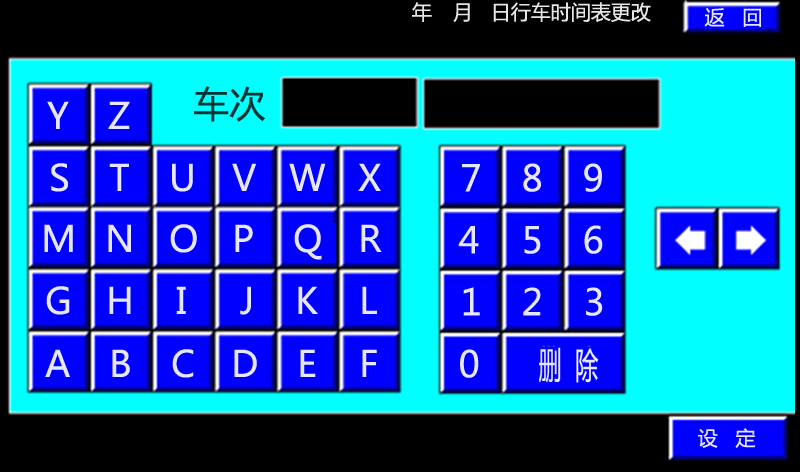
<style>
.page{position:relative;width:800px;height:472px;background:#000000}
.page>*{position:absolute;margin:0}
.t1{font:20px "MicrosoftYaHei";color:#e6e6e6}
.t2{font:20px "MicrosoftYaHei";color:#e6e6ff}
.t3{font:36px "MicrosoftYaHei";color:#003333}
.t4{font:36px "MicrosoftYaHei";color:#e6e6ff}
</style>
<div class="page">
<p class="t1" style="left:412px;top:2px;width:20px;height:20px">年</p>
<p class="t1" style="left:453px;top:3px;width:17px;height:20px">月</p>
<p class="t1" style="left:493px;top:2px;width:158px;height:20px">日行车时间表更改</p>
<p class="t2" style="left:704px;top:8px;width:57px;height:19px">返   回</p>
<p class="t3" style="left:194px;top:86px;width:71px;height:36px">车次</p>
<p class="t4" style="left:47px;top:101px;width:22px;height:28px">Y</p>
<p class="t4" style="left:108px;top:101px;width:22px;height:28px">Z</p>
<p class="t4" style="left:51px;top:163px;width:17px;height:29px">S</p>
<p class="t4" style="left:109px;top:163px;width:20px;height:28px">T</p>
<p class="t4" style="left:172px;top:163px;width:21px;height:29px">U</p>
<p class="t4" style="left:232px;top:163px;width:25px;height:28px">V</p>
<p class="t4" style="left:289px;top:163px;width:37px;height:28px">W</p>
<p class="t4" style="left:358px;top:163px;width:23px;height:28px">X</p>
<p class="t4" style="left:462px;top:164px;width:18px;height:28px">7</p>
<p class="t4" style="left:523px;top:163px;width:18px;height:29px">8</p>
<p class="t4" style="left:584px;top:163px;width:18px;height:29px">9</p>
<p class="t4" style="left:44px;top:224px;width:29px;height:28px">M</p>
<p class="t4" style="left:108px;top:224px;width:23px;height:28px">N</p>
<p class="t4" style="left:170px;top:224px;width:27px;height:29px">O</p>
<p class="t4" style="left:235px;top:224px;width:18px;height:28px">P</p>
<p class="t4" style="left:294px;top:224px;width:28px;height:36px">Q</p>
<p class="t4" style="left:361px;top:224px;width:21px;height:28px">R</p>
<p class="t4" style="left:458px;top:226px;width:21px;height:28px">4</p>
<p class="t4" style="left:524px;top:226px;width:17px;height:28px">5</p>
<p class="t4" style="left:584px;top:225px;width:19px;height:29px">6</p>
<p class="t4" style="left:46px;top:286px;width:24px;height:29px">G</p>
<p class="t4" style="left:109px;top:286px;width:22px;height:28px">H</p>
<p class="t4" style="left:176px;top:286px;width:10px;height:28px">I</p>
<p class="t4" style="left:240px;top:286px;width:11px;height:29px">J</p>
<p class="t4" style="left:298px;top:286px;width:20px;height:28px">K</p>
<p class="t4" style="left:362px;top:286px;width:15px;height:28px">L</p>
<p class="t4" style="left:463px;top:287px;width:17px;height:29px">1</p>
<p class="t4" style="left:523px;top:287px;width:18px;height:29px">2</p>
<p class="t4" style="left:586px;top:287px;width:17px;height:29px">3</p>
<p class="t4" style="left:45px;top:349px;width:25px;height:28px">A</p>
<p class="t4" style="left:112px;top:349px;width:18px;height:28px">B</p>
<p class="t4" style="left:172px;top:349px;width:22px;height:29px">C</p>
<p class="t4" style="left:234px;top:349px;width:23px;height:28px">D</p>
<p class="t4" style="left:300px;top:349px;width:16px;height:28px">E</p>
<p class="t4" style="left:362px;top:349px;width:15px;height:28px">F</p>
<p class="t4" style="left:460px;top:349px;width:19px;height:29px">0</p>
<p class="t2" style="left:698px;top:428px;width:58px;height:20px">设   定</p>
</div>
